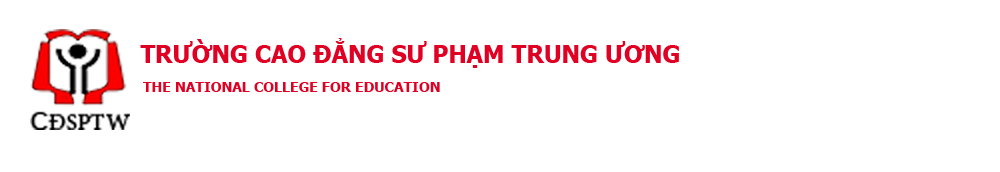
<style>
.page{position:relative;width:1000px;height:172px;background:#ffffff}
.page>*{position:absolute;margin:0}
.t1{font:24px "Tahoma-Bold";color:#df0023}
.t2{font:14px "Tahoma-Bold";color:#df0023}
</style>
<div class="page">
<p class="t1" style="left:140px;top:38px;width:539px;height:30px">TRƯỜNG CAO ĐẲNG SƯ PHẠM TRUNG ƯƠNG</p>
<p class="t2" style="left:143px;top:82px;width:297px;height:10px">THE NATIONAL COLLEGE FOR EDUCATION</p>
</div>
